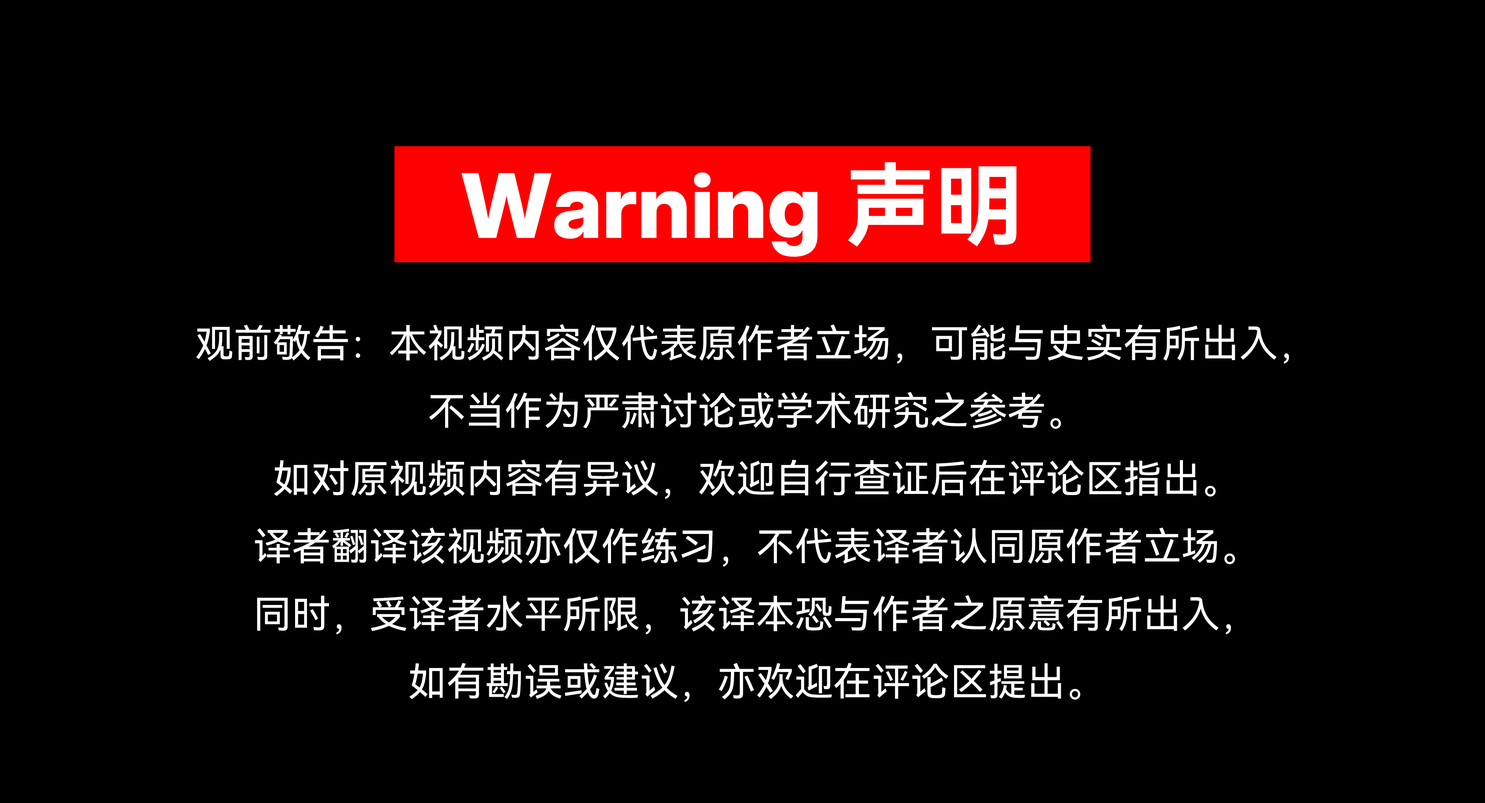
<style>
.page{position:relative;width:1485px;height:803px;background:#000000}
.page>*{position:absolute;margin:0}
.t1{font:89px "InterDisplay-ExtraBold";color:#ffffff}
.t2{font:89px "HarmonyOS_Sans_SC_Bold";color:#ffffff}
.t3{font:38.7px "HarmonyOS_Sans_SC";color:#ffffff}
</style>
<div class="page">
<p class="t1" style="left:461px;top:162px;width:556px;height:95px">Warning <span class="t2">声明</span></p>
<p class="t3" style="left:196px;top:324px;width:1093px;height:378px;text-align:center">观前敬告：本视频内容仅代表原作者立场，可能与史实有所出入，<br>不当作为严肃讨论或学术研究之参考。<br>如对原视频内容有异议，欢迎自行查证后在评论区指出。<br>译者翻译该视频亦仅作练习，不代表译者认同原作者立场。<br>同时，受译者水平所限，该译本恐与作者之原意有所出入，<br>如有勘误或建议，亦欢迎在评论区提出。</p>
</div>
